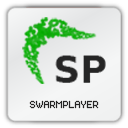
<style>
.page{position:relative;width:128px;height:128px}
.page>*{position:absolute;margin:0}
.t1{font:9px "Volter(Goldfish)-Regular";color:#252525}
</style>
<div class="page">
<p class="t1" style="left:29px;top:100px;width:70px;height:9px">SWARMPLAYER</p>
</div>
